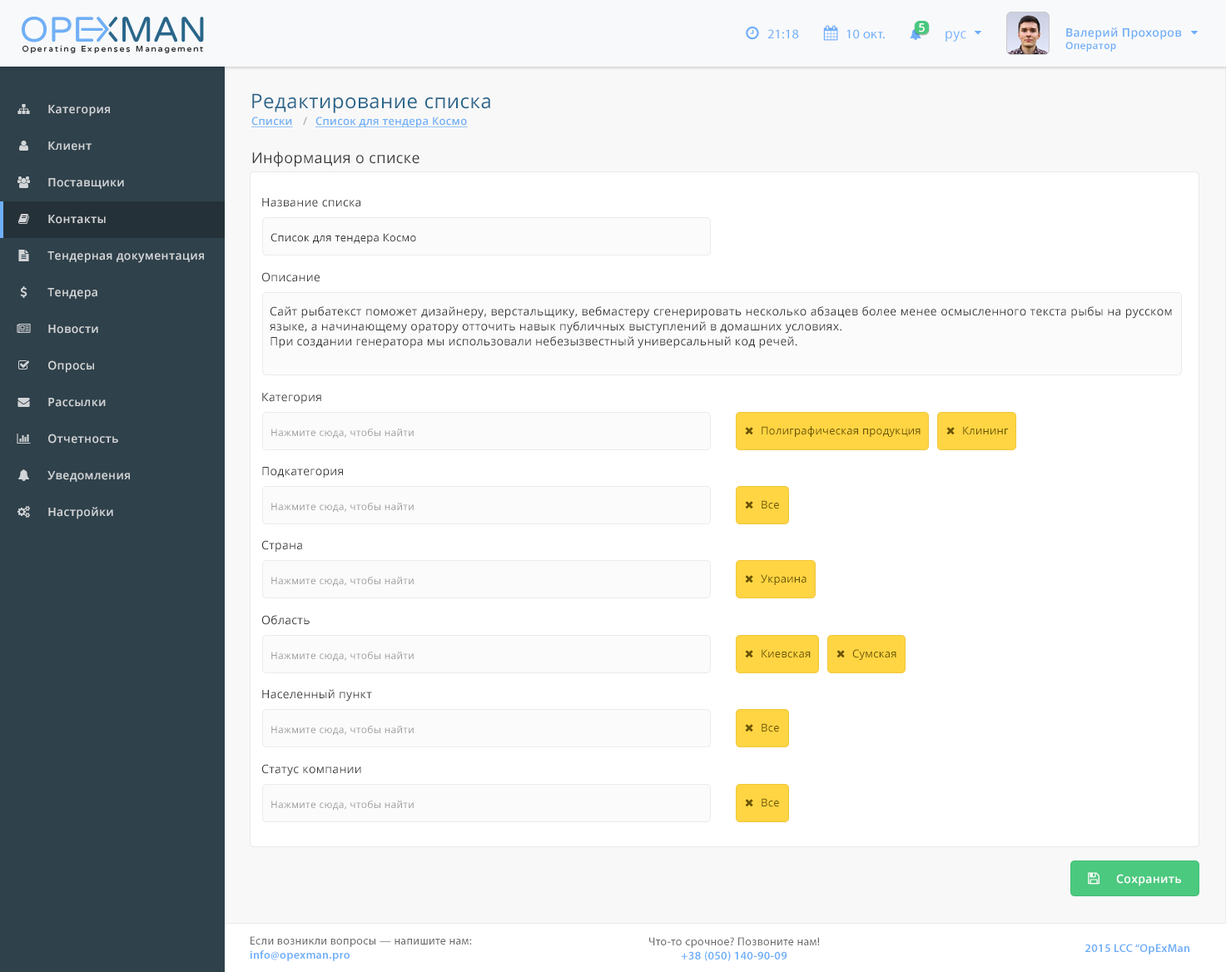
<style>
.page{position:relative;width:1226px;height:972px;background:#ffffff}
.page>*{position:absolute;margin:0}
.t1{font:13.3px "MyriadPro-Regular";letter-spacing:0.025em;color:#6faff8}
.t2{font:11.6px "OpenSans-Semibold";letter-spacing:0.025em;color:#ffffff}
.t3{font:11.6px "OpenSans-Semibold";letter-spacing:0.025em;color:#6eaef7}
.t4{font:10px "OpenSans-Semibold";letter-spacing:0.025em;color:#6eaef7}
.t5{font:13.3px "OpenSans";letter-spacing:0.025em;color:#6eaff8}
.t6{font:19.9px "OpenSans";letter-spacing:0.025em;color:#29658b}
.t7{font:11.6px "OpenSans-Semibold";letter-spacing:0.025em;color:#d2d5d7}
.t8{font:10.8px "OpenSans-Semibold";letter-spacing:0.025em;color:#6faff8;text-decoration:underline}
.t9{font:10.8px "OpenSans-Semibold";letter-spacing:0.025em;color:#afafaf}
.t10{font:14.9px "OpenSans";letter-spacing:0.025em;color:#373838}
.t11{font:11.6px "OpenSans";letter-spacing:0.025em;color:#373838}
.t12{font:10.8px "OpenSans";letter-spacing:0.025em;color:#333333}
.t13{font:11.6px/14.9px "OpenSans";letter-spacing:0.025em;color:#333333}
.t14{font:10px "OpenSans";letter-spacing:0.025em;color:#999999}
.t15{font:10.8px "OpenSans";letter-spacing:0.025em;color:#6b5405}
.t16{font:11.6px "OpenSans";letter-spacing:0.025em;color:#333333}
.t17{font:11.6px "MyriadPro-Regular";letter-spacing:0.025em;color:#696969}
.t18{font:11.6px "MyriadPro-Semibold";letter-spacing:0.025em;color:#6eaef8}
</style>
<div class="page">
<p class="t1" style="left:768px;top:29px;width:31px;height:10px">21:18</p>
<p class="t1" style="left:847px;top:29px;width:38px;height:10px">10 окт.</p>
<p class="t2" style="left:919px;top:23px;width:6px;height:9px">5</p>
<p class="t3" style="left:1066px;top:27px;width:116px;height:25px">Валерий Прохоров<br><span class="t4">Оператор</span></p>
<p class="t5" style="left:946px;top:31px;width:21px;height:11px">рус</p>
<p class="t6" style="left:252px;top:93px;width:238px;height:20px">Редактирование списка</p>
<p class="t7" style="left:48px;top:105px;width:62px;height:12px">Категория</p>
<p class="t8" style="left:251px;top:117px;width:42px;height:10px">Списки</p>
<p class="t9" style="left:303px;top:117px;width:4px;height:8px">/</p>
<p class="t8" style="left:316px;top:117px;width:152px;height:10px">Список для тендера Космо</p>
<p class="t7" style="left:48px;top:142px;width:44px;height:9px">Клиент</p>
<p class="t10" style="left:252px;top:152px;width:168px;height:15px">Информация о списке</p>
<p class="t7" style="left:48px;top:178px;width:76px;height:11px">Поставщики</p>
<p class="t11" style="left:262px;top:198px;width:98px;height:9px">Название списка</p>
<p class="t7" style="left:48px;top:215px;width:58px;height:9px">Контакты</p>
<p class="t12" style="left:271px;top:233px;width:145px;height:11px">Список для тендера Космо</p>
<p class="t7" style="left:47px;top:251px;width:157px;height:12px">Тендерная документация</p>
<p class="t11" style="left:261px;top:272px;width:59px;height:10px">Описание</p>
<p class="t7" style="left:47px;top:288px;width:50px;height:12px">Тендера</p>
<p class="t13" style="left:270px;top:306px;width:902px;height:43px;text-align:justify">Сайт рыбатекст поможет дизайнеру, верстальщику, вебмастеру сгенерировать несколько абзацев более менее осмысленного текста рыбы на русском языке, а начинающему оратору отточить навык публичных выступлений в домашних условиях.<br>При создании генератора мы использовали небезызвестный универсальный код речей.</p>
<p class="t7" style="left:48px;top:325px;width:50px;height:9px">Новости</p>
<p class="t7" style="left:48px;top:360px;width:46px;height:13px">Опросы</p>
<p class="t7" style="left:48px;top:398px;width:58px;height:9px">Рассылки</p>
<p class="t11" style="left:262px;top:393px;width:59px;height:12px">Категория</p>
<p class="t7" style="left:48px;top:434px;width:70px;height:10px">Отчетность</p>
<p class="t14" style="left:271px;top:429px;width:143px;height:10px">Нажмите сюда, чтобы найти</p>
<p class="t15" style="left:762px;top:426px;width:159px;height:11px">Полиграфическая продукция</p>
<p class="t15" style="left:963px;top:426px;width:46px;height:9px">Клининг</p>
<p class="t7" style="left:47px;top:471px;width:83px;height:11px">Уведомления</p>
<p class="t11" style="left:262px;top:467px;width:81px;height:12px">Подкатегория</p>
<p class="t7" style="left:48px;top:507px;width:65px;height:12px">Настройки</p>
<p class="t14" style="left:271px;top:503px;width:143px;height:10px">Нажмите сюда, чтобы найти</p>
<p class="t15" style="left:762px;top:500px;width:17px;height:10px">Все</p>
<p class="t16" style="left:261px;top:540px;width:41px;height:13px">Страна</p>
<p class="t14" style="left:271px;top:577px;width:143px;height:10px">Нажмите сюда, чтобы найти</p>
<p class="t15" style="left:761px;top:574px;width:46px;height:11px">Украина</p>
<p class="t16" style="left:261px;top:615px;width:49px;height:10px">Область</p>
<p class="t14" style="left:271px;top:652px;width:143px;height:10px">Нажмите сюда, чтобы найти</p>
<p class="t15" style="left:762px;top:649px;width:49px;height:10px">Киевская</p>
<p class="t15" style="left:852px;top:649px;width:45px;height:11px">Сумская</p>
<p class="t11" style="left:262px;top:689px;width:110px;height:13px">Населенный пункт</p>
<p class="t14" style="left:271px;top:726px;width:143px;height:10px">Нажмите сюда, чтобы найти</p>
<p class="t15" style="left:762px;top:723px;width:17px;height:10px">Все</p>
<p class="t11" style="left:261px;top:764px;width:100px;height:13px">Статус компании</p>
<p class="t14" style="left:271px;top:801px;width:143px;height:10px">Нажмите сюда, чтобы найти</p>
<p class="t15" style="left:762px;top:798px;width:17px;height:10px">Все</p>
<p class="t2" style="left:1116px;top:874px;width:65px;height:13px">Сохранить</p>
<p class="t17" style="left:250px;top:937px;width:222px;height:25px">Если возникли вопросы — напишите нам:<br><span class="t18">info@opexman.pro</span></p>
<p class="t17" style="left:649px;top:937px;width:171px;height:25px;text-align:center">Что-то срочное? Позвоните нам!<br><span class="t18">+38 (050) 140-90-09</span></p>
<p class="t18" style="left:1086px;top:944px;width:104px;height:11px">2015 LCC “OpExMan</p>
</div>
